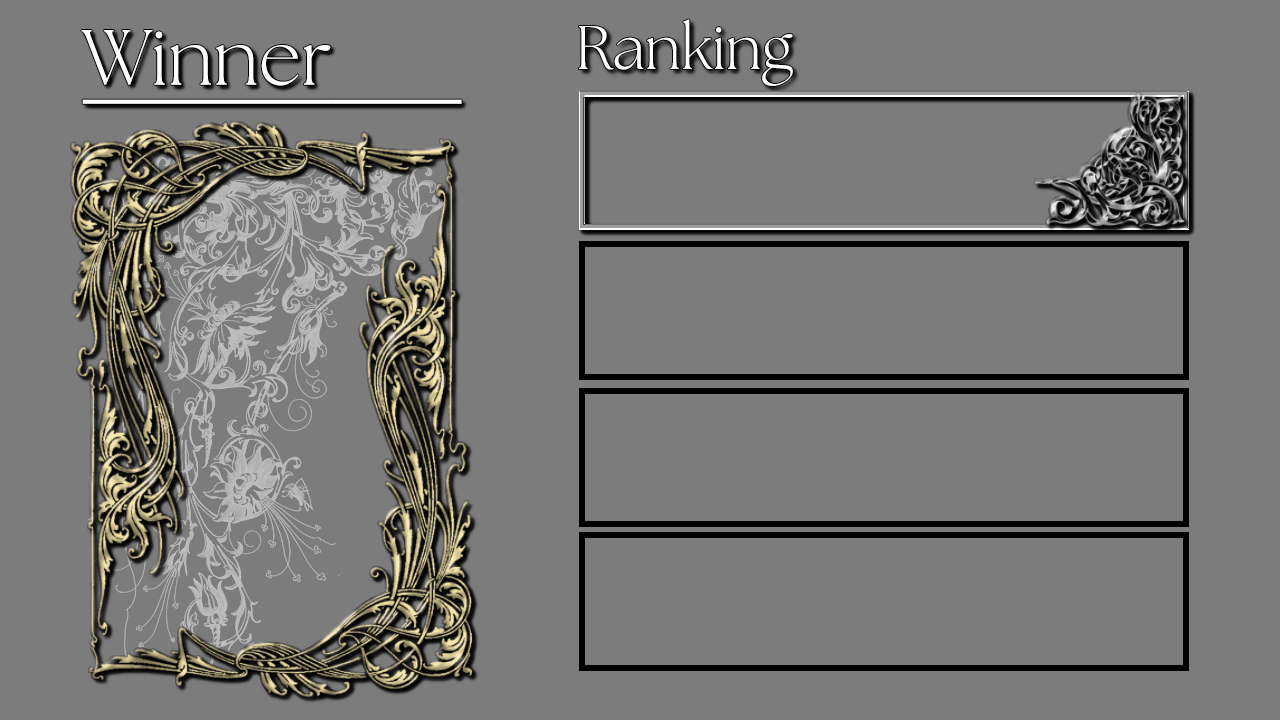
<style>
.page{position:relative;width:1280px;height:720px;background:#7c7c7c}
.page>*{position:absolute;margin:0}
.t1{font:77.8px "TheSeasons-Light";letter-spacing:0.005em;color:#ffffff;text-decoration:underline}
.t2{font:61.1px "TheSeasons-Light";letter-spacing:0.005em;color:#ffffff}
</style>
<div class="page">
<p class="t1" style="left:81px;top:30px;width:381px;height:74px">Winner</p>
<p class="t2" style="left:579px;top:19px;width:214px;height:67px">Ranking</p>
</div>
